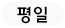
<style>
.page{position:relative;width:65px;height:28px;background:#fafafa}
.page>*{position:absolute;margin:0}
.t1{font:17.9px "CreGoB";color:#000000}
</style>
<div class="page">
<p class="t1" style="left:17px;top:6px;width:30px;height:18px">평일</p>
<p class="t1" style="left:17px;top:6px;width:30px;height:18px">평일</p>
</div>
